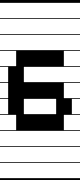
<style>
.page{position:relative;width:80px;height:180px;background:#ffffff}
.page>*{position:absolute;margin:0}
.t1{font:16px/16px "FixedsysExcelsiorIIIb";color:#ffffff}
</style>
<div class="page">
<p class="t1" style="left:0px;top:2px;width:80px;height:177px">██████████<br>██████████<br>██████████<br>██      ██<br>█  ███████<br>█       ██<br>█  ████  █<br>██      ██<br>██████████<br>██████████<br>██████████</p>
</div>
